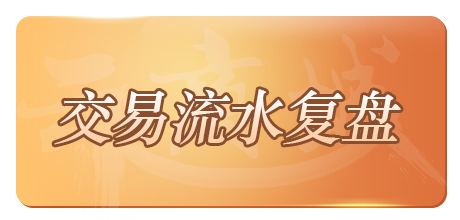
<style>
.page{position:relative;width:460px;height:220px}
.page>*{position:absolute;margin:0}
.t1{font:59px "STZhongsong";letter-spacing:-0.025em;font-style:italic}
</style>
<div class="page">
<p class="t1" style="left:54px;top:89px;width:347px;height:56px">交易流水复盘</p>
</div>
